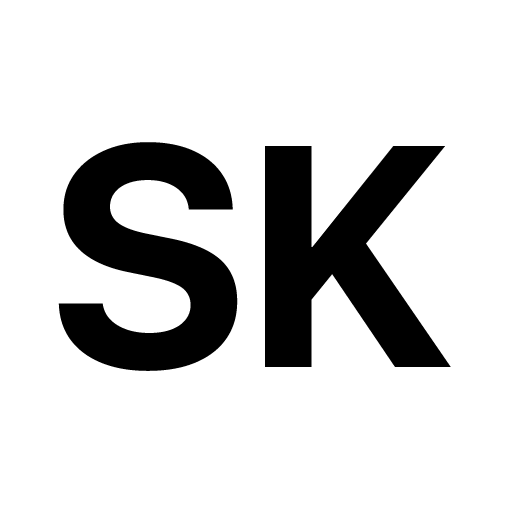
<style>
.page{position:relative;width:512px;height:512px;background:#ffffff}
.page>*{position:absolute;margin:0}
.t1{font:313.4px "SFPro-Bold";color:#000000}
</style>
<div class="page">
<p class="t1" style="left:58px;top:142px;width:393px;height:229px">SK</p>
</div>
